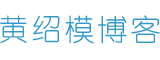
<style>
.page{position:relative;width:160px;height:60px;background:#ffffff}
.page>*{position:absolute;margin:0}
.t1{font:30px "YouYuan";letter-spacing:0.1em;color:#3399cc}
</style>
<div class="page">
<p class="t1" style="left:0px;top:15px;width:160px;height:29px">黄绍模博客</p>
</div>
